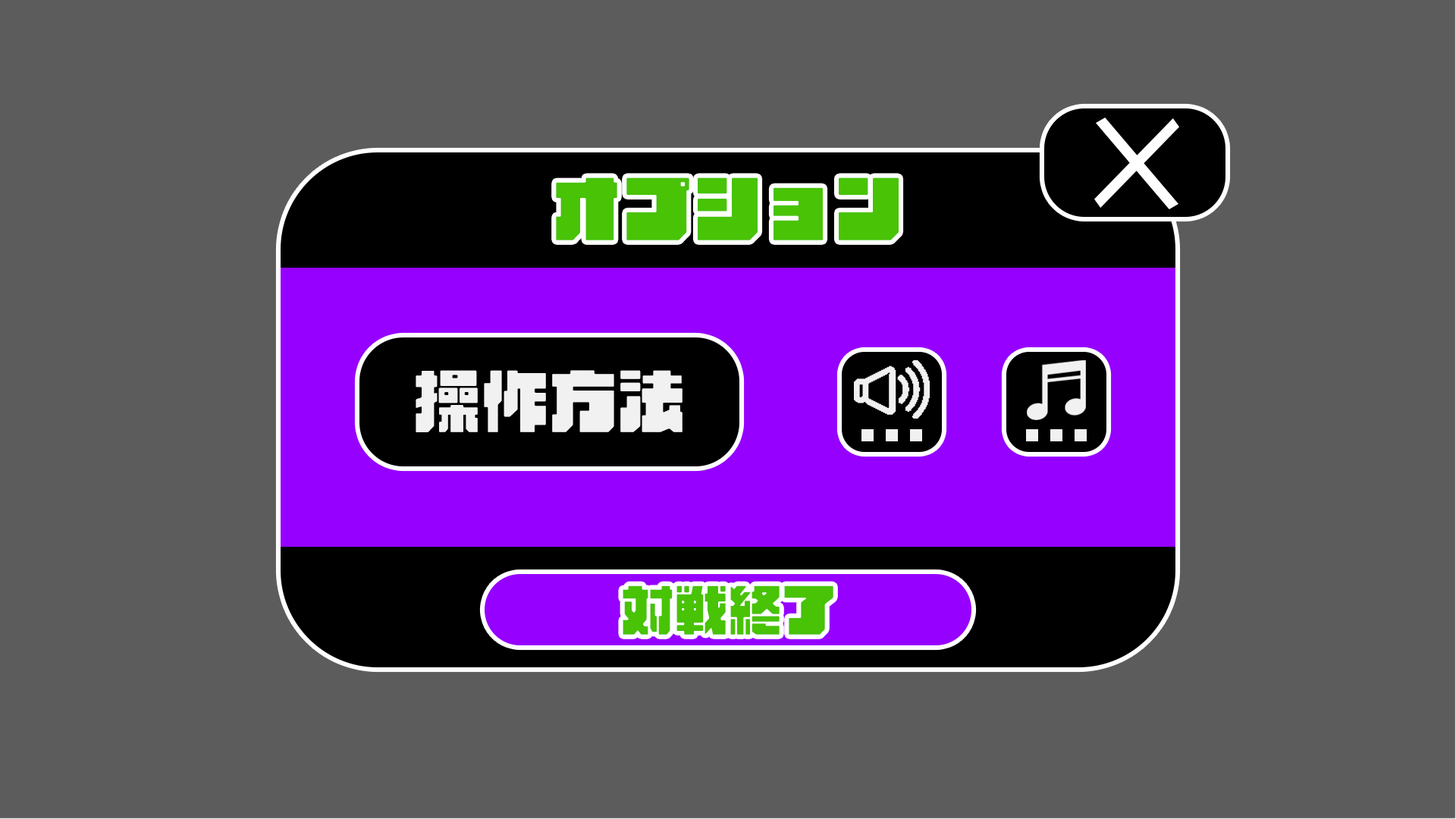
<style>
.page{position:relative;width:1456px;height:819px;background:#5c5c5c}
.page>*{position:absolute;margin:0}
.t1{font:70.5px "AB-countryroad";color:#48c305}
.t2{font:68.2px "AB-countryroad";color:#f1f1f1}
.t3{font:53.8px "AB-countryroad";color:#48c305}
</style>
<div class="page">
<p class="t1" style="left:556px;top:177px;width:343px;height:63px">オプション</p>
<p class="t2" style="left:416px;top:370px;width:266px;height:62px">操作方法</p>
<p class="t3" style="left:623px;top:585px;width:210px;height:50px">対戦終了</p>
</div>
